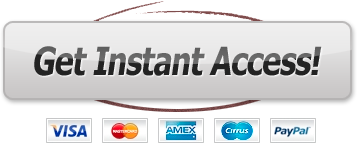
<style>
.page{position:relative;width:357px;height:149px;background:#ffffff}
.page>*{position:absolute;margin:0}
.t1{font:38.7px "Tahoma-Bold";letter-spacing:-0.025em;font-style:italic;scale:0.8 1}
</style>
<div class="page">
<p class="t1" style="left:34px;top:46px;width:288px;height:30px">Get Instant Access!</p>
</div>
